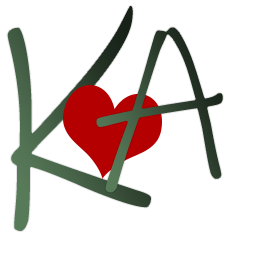
<style>
.page{position:relative;width:256px;height:256px;background:#ffffff}
.page>*{position:absolute;margin:0}
.t1{font:300px "InkFree";letter-spacing:-0.01em;color:#ffffff}
.t2{font:220px "InkFree";letter-spacing:-0.01em;color:#ffffff}
</style>
<div class="page">
<p class="t1" style="left:6px;top:5px;width:146px;height:227px">K</p>
<p class="t2" style="left:95px;top:26px;width:129px;height:168px">A</p>
</div>
